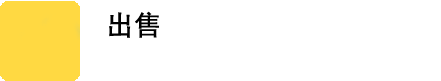
<style>
.page{position:relative;width:441px;height:81px;background:#ffffff}
.page>*{position:absolute;margin:0}
.t1{font:27.8px "AdobeHeitiStd-Regular";color:#010101}
</style>
<div class="page">
<p class="t1" style="left:109px;top:11px;width:50px;height:27px">出售</p>
</div>
